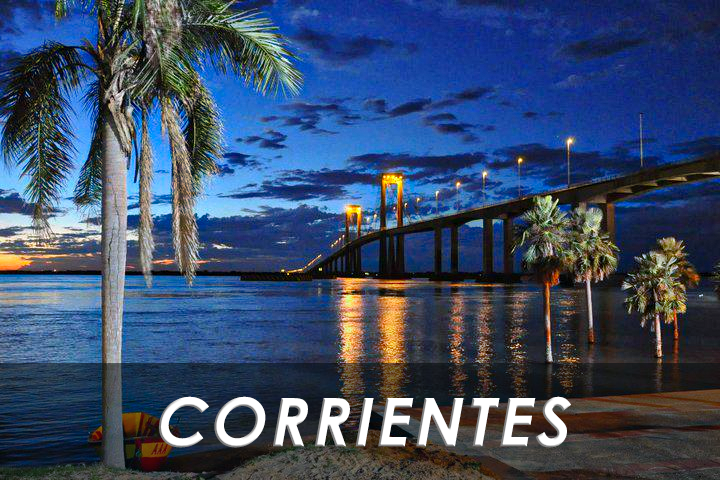
<style>
.page{position:relative;width:720px;height:480px}
.page>*{position:absolute;margin:0}
.t1{font:66.7px "CenturyGothic-Bold";letter-spacing:0.05em;color:#ffffff;font-style:italic}
</style>
<div class="page">
<p class="t1" style="left:159px;top:396px;width:412px;height:52px">CORRIENTES</p>
</div>
